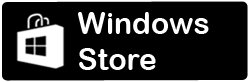
<style>
.page{position:relative;width:250px;height:82px;background:#000000}
.page>*{position:absolute;margin:0}
.t1{font:30px "ArialRoundedMTBold";color:#ffffff}
</style>
<div class="page">
<p class="t1" style="left:78px;top:12px;width:131px;height:58px">Windows<br>Store</p>
</div>
